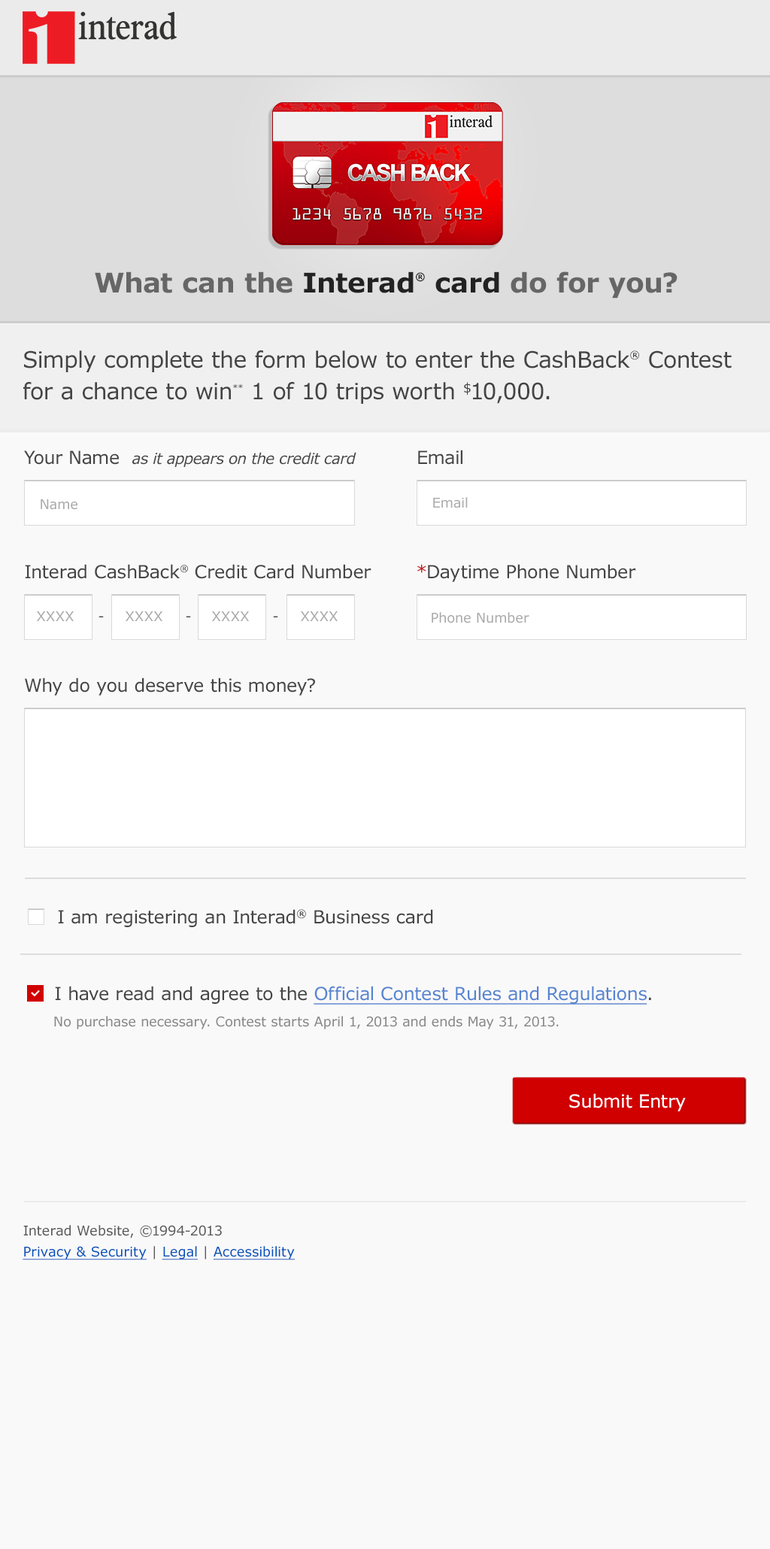
<style>
.page{position:relative;width:770px;height:1549px;background:#f9f9f9}
.page>*{position:absolute;margin:0}
.t1{font:27.1px "Verdana-Bold";color:#666666}
.t2{font:27.1px "Verdana-Bold";color:#222222}
.t3{font:18px "Verdana-Bold";color:#222222}
.t4{font:22.6px/31.6px "Verdana";letter-spacing:-0.01em;color:#444444}
.t5{font:18px/31.6px "Verdana";letter-spacing:-0.01em;color:#444444}
.t6{font:15px/31.6px "Verdana";letter-spacing:-0.01em;color:#444444}
.t7{font:18px "Verdana";letter-spacing:-0.01em;color:#444444}
.t8{font:15px "Verdana-Italic";letter-spacing:-0.025em;color:#444444}
.t9{font:13.5px "Verdana";letter-spacing:-0.005em;color:#aaaaaa}
.t10{font:15px "Verdana";letter-spacing:-0.01em;color:#444444}
.t11{font:18px "Verdana";letter-spacing:-0.01em;color:#c31b1b}
.t12{font:13.5px "Verdana";letter-spacing:-0.005em;color:#444444}
.t13{font:18px "Verdana";letter-spacing:-0.01em;color:#5684d0;text-decoration:underline}
.t14{font:13.5px "Verdana";letter-spacing:-0.01em;color:#888888}
.t15{font:18px "Verdana";letter-spacing:-0.01em;color:#ffffff}
.t16{font:13.5px/21.1px "Verdana";color:#595959}
.t17{font:13.5px/21.1px "Verdana";color:#0051bb;text-decoration:underline}
</style>
<div class="page">
<p class="t1" style="left:95px;top:271px;width:582px;height:27px">What can the<span class="t2"> Interad</span><span class="t3">®</span><span class="t2"> card </span>do for you?</p>
<p class="t4" style="left:23px;top:350px;width:709px;height:54px">Simply complete the form below to enter the CashBack<span class="t5">®</span> Contest for a chance to win<span class="t6">**</span> 1 of 10 trips worth $10,000.</p>
<p class="t7" style="left:418px;top:450px;width:44px;height:15px">Email</p>
<p class="t8" style="left:24px;top:450px;width:332px;height:17px"><span class="t7">Your Name  </span>as it appears on the credit card</p>
<p class="t9" style="left:433px;top:497px;width:35px;height:11px">Email</p>
<p class="t9" style="left:41px;top:499px;width:36px;height:11px">Name</p>
<p class="t7" style="left:25px;top:564px;width:346px;height:15px">Interad CashBack<span class="t10">®</span> Credit Card Number</p>
<p class="t7" style="left:417px;top:564px;width:219px;height:18px"><span class="t11">*</span>Daytime Phone Number</p>
<p class="t9" style="left:37px;top:611px;width:37px;height:10px">XXXX</p>
<p class="t12" style="left:98px;top:616px;width:6px;height:1px">-</p>
<p class="t9" style="left:126px;top:611px;width:36px;height:10px">XXXX</p>
<p class="t12" style="left:186px;top:616px;width:5px;height:1px">-</p>
<p class="t9" style="left:212px;top:611px;width:37px;height:10px">XXXX</p>
<p class="t12" style="left:273px;top:616px;width:5px;height:1px">-</p>
<p class="t9" style="left:301px;top:611px;width:37px;height:10px">XXXX</p>
<p class="t9" style="left:432px;top:612px;width:97px;height:11px">Phone Number</p>
<p class="t7" style="left:25px;top:677px;width:290px;height:18px">Why do you deserve this money?</p>
<p class="t7" style="left:58px;top:909px;width:375px;height:18px">I am registering an Interad® Business card</p>
<p class="t13" style="left:55px;top:986px;width:596px;height:18px"><span class="t7">I have read and agree to the </span>Official Contest Rules and Regulations<span class="t7">.</span></p>
<p class="t14" style="left:54px;top:1016px;width:505px;height:13px">No purchase necessary. Contest starts April 1, 2013 and ends May 31, 2013.</p>
<p class="t15" style="left:569px;top:1093px;width:117px;height:18px">Submit Entry</p>
<p class="t16" style="left:23px;top:1225px;width:272px;height:35px">Interad Website, ©1994-2013<br><span class="t17">Privacy &amp; Security</span> | <span class="t17">Legal</span> | <span class="t17">Accessibility</span></p>
</div>
